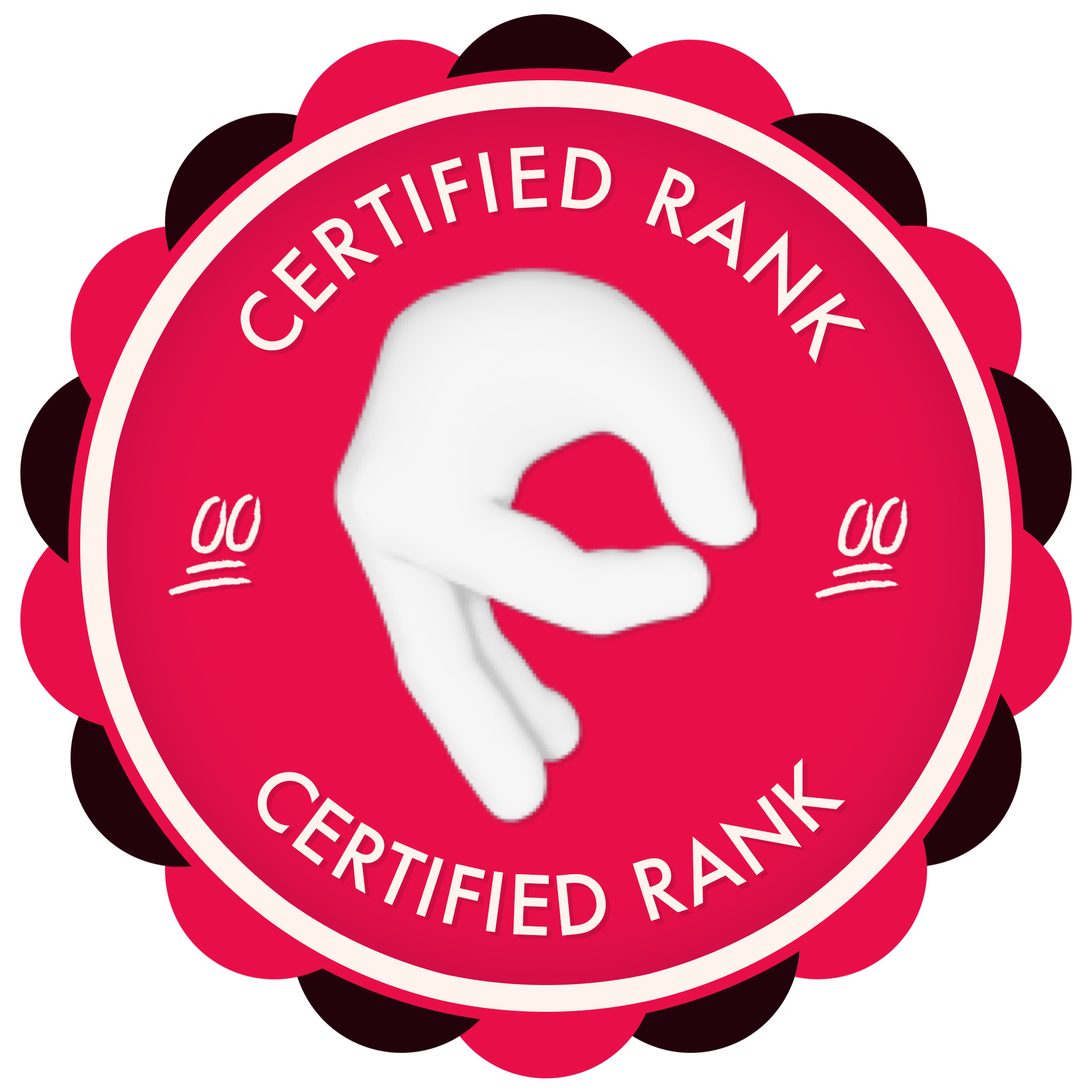
<style>
.page{position:relative;width:1092px;height:1092px;background:#ffffff}
.page>*{position:absolute;margin:0}
.t1{font:79.6px "Futura-Medium";letter-spacing:0.025em;color:#fff3ee}
.t2{font:79.6px "Futura-Medium";letter-spacing:0.05em;color:#fff3ee}
</style>
<div class="page">
<p class="t1" style="left:241px;top:146px;width:625px;height:217px;rotate:118deg">CERTIFIED RANK</p>
<p class="t2" style="left:258px;top:758px;width:587px;height:178px;text-align:center">CERTIFIED RANK</p>
</div>
